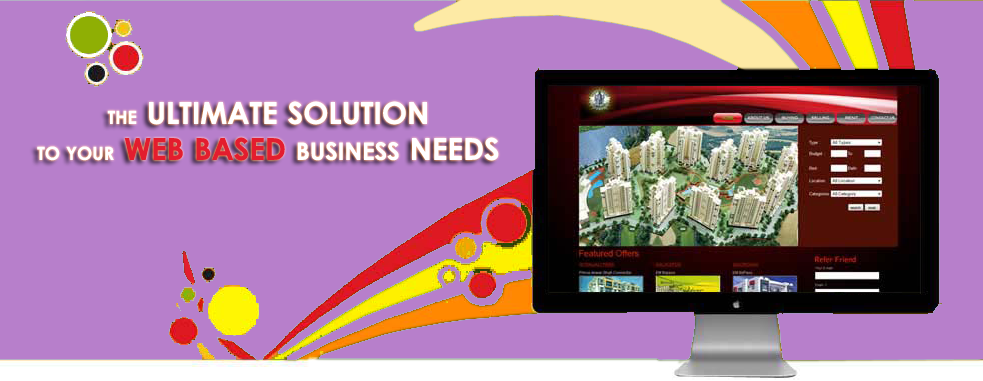
<style>
.page{position:relative;width:983px;height:381px;background:#b77fcb}
.page>*{position:absolute;margin:0}
.t1{font:30px "LevenimMT-Bold";color:#ffffff}
.t2{font:18px "LevenimMT-Bold";color:#ffffff}
.t3{font:30px "LevenimMT-Bold";color:#e31d2e}
.t4{font:24px "LevenimMT-Bold";color:#ffffff}
</style>
<div class="page">
<p class="t1" style="left:37px;top:101px;width:462px;height:60px;text-align:center"><span class="t2">THE</span> ULTIMATE SOLUTION<br><span class="t2">TO YOUR </span><span class="t3">WEB BASED </span><span class="t4">BUSINESS</span> NEEDS</p>
</div>
